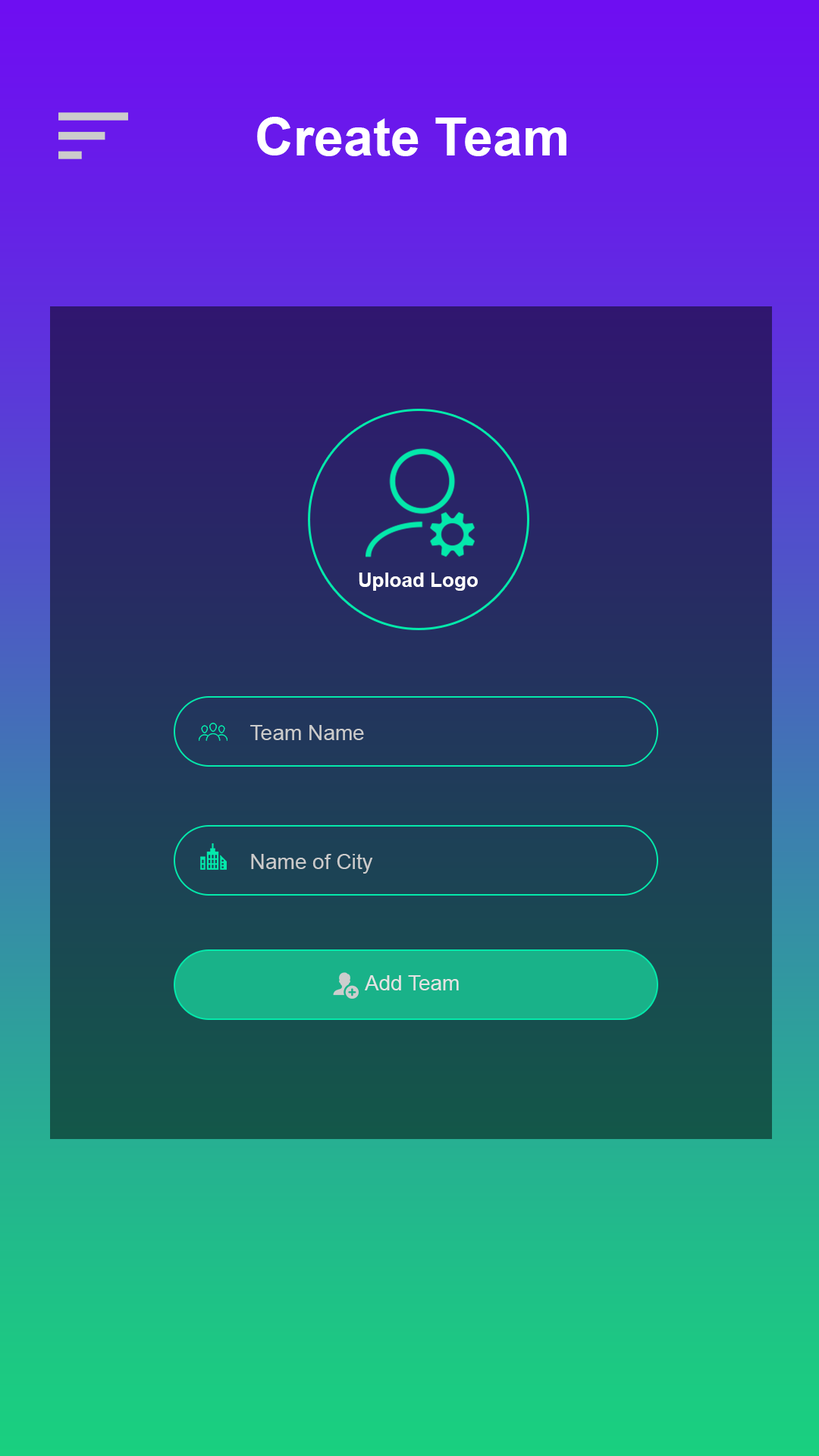
<style>
.page{position:relative;width:819px;height:1456px}
.page>*{position:absolute;margin:0}
.t1{font:53.1px "Arial-BoldMT";color:#ffffff}
.t2{font:19.7px "Arial-BoldMT";color:#ffffff}
.t3{font:21.2px "ArialMT";color:#e3e3e3}
</style>
<div class="page">
<p class="t1" style="left:257px;top:117px;width:309px;height:39px">Create Team</p>
<p class="t2" style="left:359px;top:573px;width:119px;height:18px">Upload Logo</p>
<p class="t3" style="left:250px;top:725px;width:114px;height:15px">Team Name</p>
<p class="t3" style="left:251px;top:854px;width:122px;height:20px">Name of City</p>
<p class="t3" style="left:365px;top:975px;width:94px;height:15px">Add Team</p>
</div>
